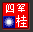
<style>
.page{position:relative;width:33px;height:32px;background:#f20000}
.page>*{position:absolute;margin:0}
.t1{font:10.4px "SimSun";color:#ffffff}
.t2{font:11.7px "SimSun";color:#ffffff}
</style>
<div class="page">
<p class="t1" style="left:6px;top:4px;width:19px;height:9px">四军</p>
<p class="t2" style="left:16px;top:15px;width:11px;height:12px">桂</p>
</div>
